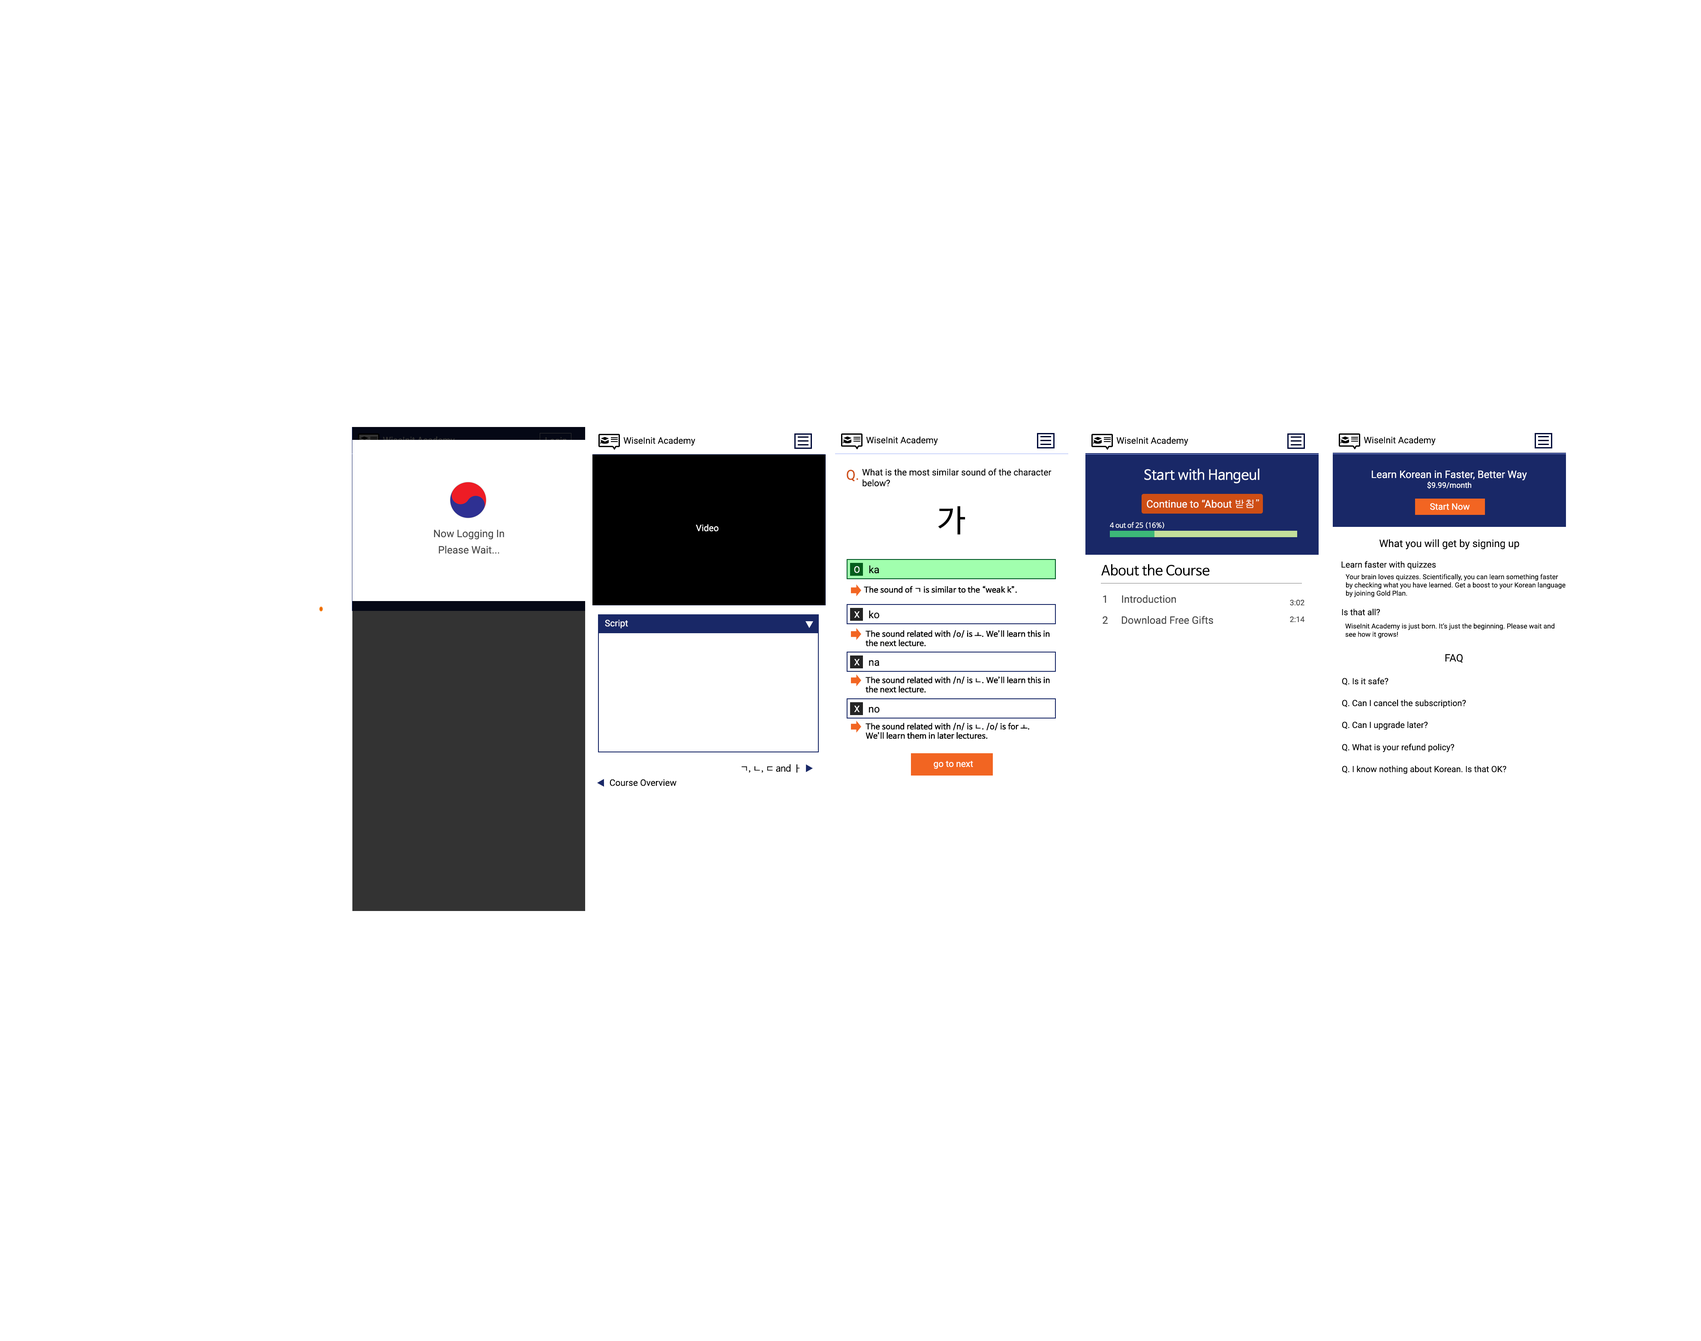
<style>
.page{position:relative;width:1701px;height:1341px;background:#ffffff}
.page>*{position:absolute;margin:0}
.t1{font:9px "Roboto-Regular";color:#000000}
.t2{font:13.7px "Roboto-Regular";color:#ce4e15}
.t3{font:13.7px "NanumBarunGothic";color:#ffffff}
.t4{font:10.3px "Roboto-Regular";color:#ffffff}
.t5{font:7.7px "Roboto-Regular";color:#ffffff}
.t6{font:30.9px "NanumBarunGothic";color:#000000}
.t7{font:10.3px "Roboto-Regular";color:#fefefe}
.t8{font:10.3px "Gulim";color:#fefefe}
.t9{font:9px "Roboto-Regular";color:#ffffff}
.t10{font:6.9px "NanumBarunGothic";color:#ffffff}
.t11{font:10.3px "Roboto-Regular";color:#484848}
.t12{font:10.3px "Roboto-Regular";color:#000000}
.t13{font:13.7px "NanumBarunGothic";color:#000000}
.t14{font:8.6px "Roboto-Regular";color:#000000}
.t15{font:6.9px "Roboto-Regular";color:#000000}
.t16{font:7.7px "NanumBarunGothic";color:#000000;font-weight:bold}
.t17{font:7.7px "Roboto-Regular";color:#484848}
.t18{font:9px "NanumBarunGothic";color:#000000}
</style>
<div class="page">
<p class="t1" style="left:623px;top:437px;width:72px;height:9px">WiseInit Academy</p>
<p class="t1" style="left:866px;top:436px;width:72px;height:9px">WiseInit Academy</p>
<p class="t1" style="left:1116px;top:437px;width:72px;height:9px">WiseInit Academy</p>
<p class="t1" style="left:1363px;top:436px;width:72px;height:9px">WiseInit Academy</p>
<p class="t2" style="left:846px;top:469px;width:12px;height:12px">Q.</p>
<p class="t1" style="left:862px;top:468px;width:189px;height:18px">What is the most similar sound of the character<br>below?</p>
<p class="t3" style="left:1144px;top:468px;width:115px;height:15px">Start with Hangeul</p>
<p class="t4" style="left:1371px;top:470px;width:156px;height:10px">Learn Korean in Faster, Better Way</p>
<p class="t5" style="left:1427px;top:481px;width:44px;height:8px">$9.99/month</p>
<p class="t6" style="left:938px;top:506px;width:27px;height:28px">가</p>
<p class="t7" style="left:1146px;top:499px;width:113px;height:9px">Continue to “About <span class="t8">받침”</span></p>
<p class="t9" style="left:1430px;top:503px;width:40px;height:7px">Start Now</p>
<p class="t10" style="left:1110px;top:522px;width:54px;height:6px">4 out of 25 (16%)</p>
<p class="t11" style="left:434px;top:529px;width:70px;height:10px">Now Logging In</p>
<p class="t9" style="left:696px;top:524px;width:22px;height:7px">Video</p>
<p class="t11" style="left:438px;top:546px;width:61px;height:8px">Please Wait...</p>
<p class="t12" style="left:1379px;top:539px;width:140px;height:10px">What you will get by signing up</p>
<p class="t9" style="left:854px;top:566px;width:5px;height:7px">O</p>
<p class="t12" style="left:869px;top:565px;width:10px;height:8px">ka</p>
<p class="t13" style="left:1101px;top:564px;width:108px;height:12px">About the Course</p>
<p class="t14" style="left:1341px;top:561px;width:95px;height:9px">Learn faster with quizzes</p>
<p class="t15" style="left:1345px;top:573px;width:220px;height:24px">Your brain loves quizzes. Scientifically, you can learn something faster <br>by checking what you have learned. Get a boost to your Korean language<br>by joining Gold Plan.</p>
<p class="t16" style="left:864px;top:585px;width:153px;height:8px">The sound of ㄱ is similar to the “weak k”.</p>
<p class="t11" style="left:1103px;top:595px;width:3px;height:8px">1</p>
<p class="t11" style="left:1122px;top:595px;width:54px;height:8px">Introduction</p>
<p class="t17" style="left:1290px;top:600px;width:14px;height:6px">3:02</p>
<p class="t9" style="left:854px;top:611px;width:6px;height:7px">X</p>
<p class="t12" style="left:869px;top:610px;width:10px;height:8px">ko</p>
<p class="t11" style="left:1102px;top:616px;width:5px;height:8px">2</p>
<p class="t11" style="left:1122px;top:615px;width:91px;height:9px">Download Free Gifts</p>
<p class="t17" style="left:1290px;top:616px;width:14px;height:6px">2:14</p>
<p class="t14" style="left:1341px;top:609px;width:39px;height:6px">Is that all?</p>
<p class="t9" style="left:605px;top:619px;width:23px;height:9px">Script</p>
<p class="t16" style="left:865px;top:630px;width:185px;height:16px">The sound related with /o/ is ㅗ. We’ll learn this in <br>the next lecture.</p>
<p class="t15" style="left:1345px;top:623px;width:209px;height:15px">WiseInit Academy is just born. It’s just the beginning. Please wait and<br>see how it grows!</p>
<p class="t12" style="left:1445px;top:654px;width:17px;height:9px">FAQ</p>
<p class="t9" style="left:854px;top:659px;width:6px;height:6px">X</p>
<p class="t12" style="left:869px;top:660px;width:10px;height:6px">na</p>
<p class="t16" style="left:865px;top:676px;width:185px;height:17px">The sound related with /n/ is ㄴ. We’ll learn this in <br>the next lecture.</p>
<p class="t14" style="left:1342px;top:677px;width:46px;height:8px">Q. Is it safe?</p>
<p class="t14" style="left:1342px;top:699px;width:124px;height:9px">Q. Can I cancel the subscription?</p>
<p class="t9" style="left:854px;top:705px;width:6px;height:7px">X</p>
<p class="t12" style="left:869px;top:707px;width:10px;height:6px">no</p>
<p class="t16" style="left:865px;top:723px;width:164px;height:16px">The sound related with /n/ is ㄴ. /o/ is for ㅗ. <br>We’ll learn them in later lectures.</p>
<p class="t14" style="left:1342px;top:721px;width:86px;height:9px">Q. Can I upgrade later?</p>
<p class="t14" style="left:1342px;top:743px;width:112px;height:9px">Q. What is your refund policy?</p>
<p class="t9" style="left:933px;top:761px;width:40px;height:8px">go to next</p>
<p class="t18" style="left:741px;top:764px;width:58px;height:9px">ㄱ, ㄴ, ㄷ and ㅏ</p>
<p class="t14" style="left:1342px;top:765px;width:164px;height:9px">Q. I know nothing about Korean. Is that OK?</p>
<p class="t1" style="left:609px;top:779px;width:67px;height:7px">Course Overview</p>
</div>
